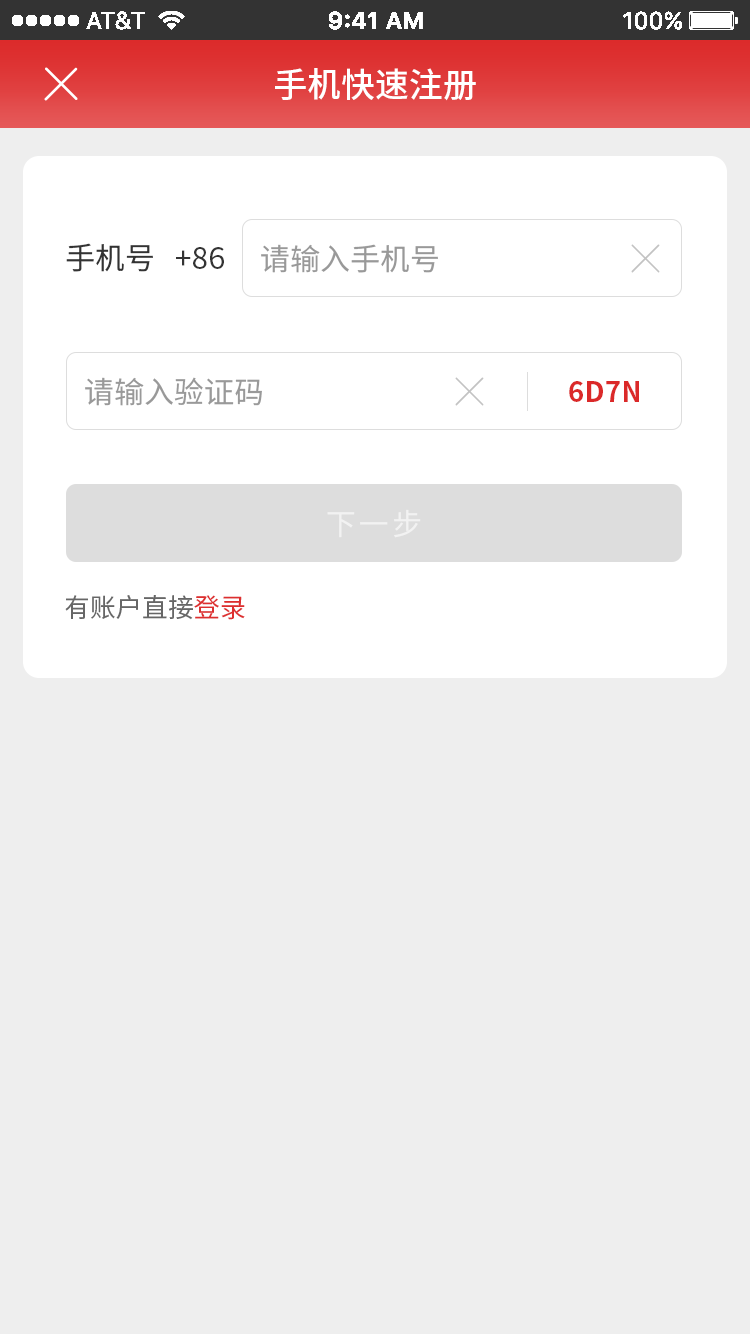
<style>
.page{position:relative;width:750px;height:1334px;background:#eeeeee}
.page>*{position:absolute;margin:0}
.t1{font:34px "SourceHanSansCN-Medium";color:#ffffff}
.t2{font:30px "SourceHanSansCN-Regular";color:#333333}
.t3{font:30px "SourceHanSansCN-Regular";color:#999999}
.t4{font:28px "SourceHanSansCN-Bold";color:#db2929}
.t5{font:30px "SourceHanSansCN-Regular";letter-spacing:0.1em;color:#f2f2f2}
.t6{font:26px "SourceHanSansCN-Regular";color:#666666}
.t7{font:26px "SourceHanSansCN-Regular";color:#dd2f2f}
</style>
<div class="page">
<p class="t1" style="left:275px;top:68px;width:201px;height:33px">手机快速注册</p>
<p class="t2" style="left:66px;top:243px;width:87px;height:29px">手机号</p>
<p class="t3" style="left:261px;top:244px;width:177px;height:29px">请输入手机号</p>
<p class="t2" style="left:176px;top:247px;width:48px;height:22px">+86</p>
<p class="t3" style="left:85px;top:377px;width:177px;height:29px">请输入验证码</p>
<p class="t4" style="left:569px;top:381px;width:70px;height:21px">6D7N</p>
<p class="t5" style="left:327px;top:509px;width:94px;height:29px">下一步</p>
<p class="t6" style="left:65px;top:595px;width:180px;height:25px">有账户直接<span class="t7">登录</span></p>
</div>
